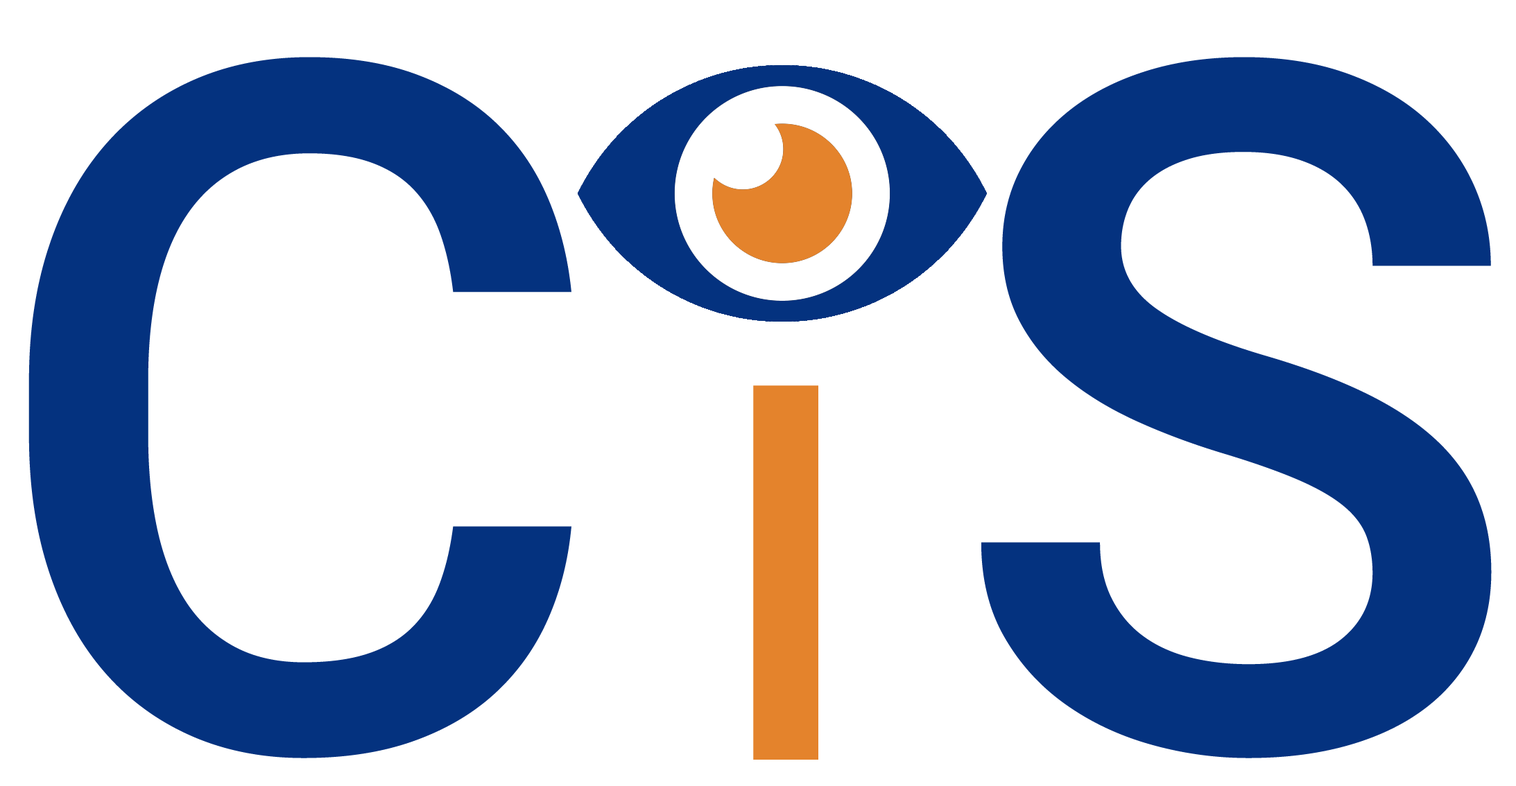
<style>
.page{position:relative;width:1516px;height:786px;background:#ffffff}
.page>*{position:absolute;margin:0}
.t1{font:959.8px "Roboto-Medium";letter-spacing:0.06em;color:#04327f}
.t2{font:526.4px "Roboto-Medium";letter-spacing:0.06em;color:#e4832c}
</style>
<div class="page">
<p class="t1" style="left:28px;top:57px;width:543px;height:702px">C</p>
<p class="t1" style="left:981px;top:57px;width:511px;height:702px">S</p>
<p class="t2" style="left:753px;top:386px;width:65px;height:374px">I</p>
</div>
